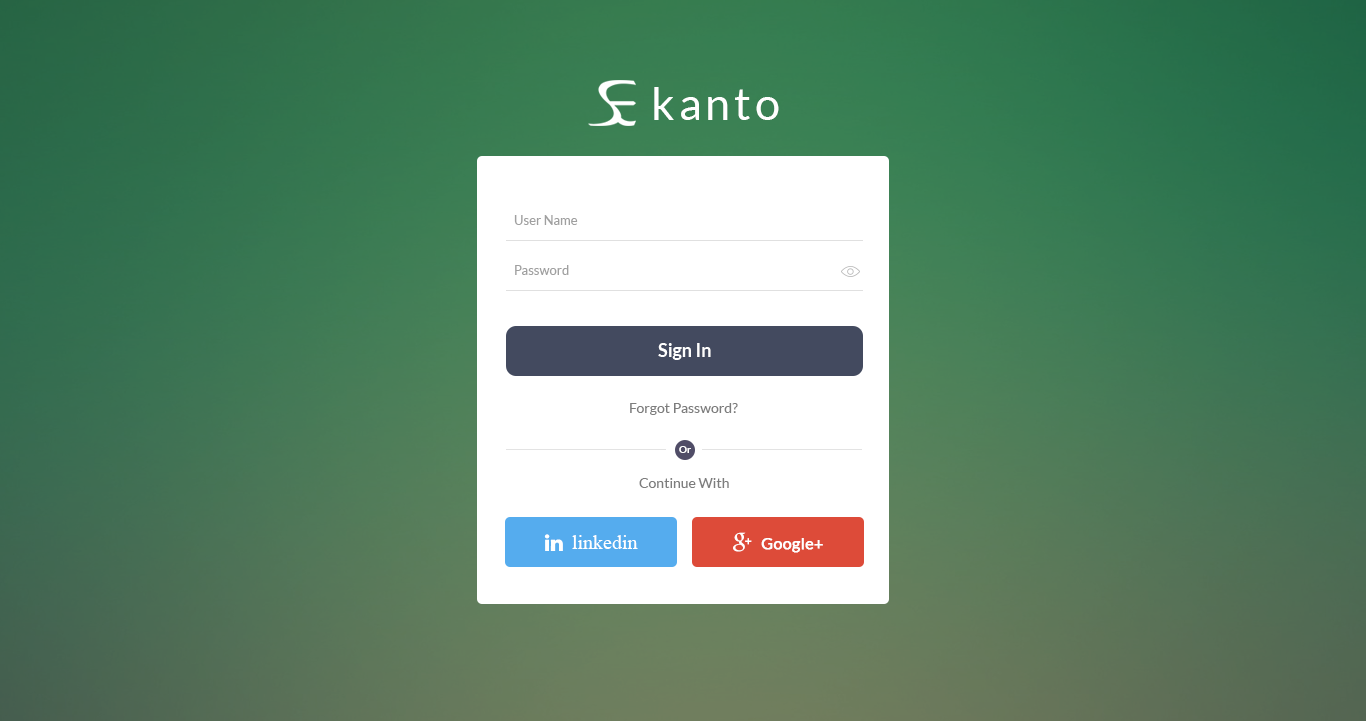
<style>
.page{position:relative;width:1366px;height:721px}
.page>*{position:absolute;margin:0}
.t1{font:44.8px "Lato-Regular";letter-spacing:0.08em;color:#ffffff}
.t2{font:13px "Lato-Regular";color:#a0a0a0}
.t3{font:18px "Lato-Bold";color:#fefefe}
.t4{font:14px "Lato-Regular";color:#7d7d7d}
.t5{font:10px "Lato-Bold";color:#ffffff}
.t6{font:20px "TimesNewRomanPSMT";color:#ffffff}
.t7{font:16px "Lato-Regular";color:#ffffff;font-weight:bold}
</style>
<div class="page">
<p class="t1" style="left:654px;top:87px;width:125px;height:33px">kanto</p>
<p class="t2" style="left:514px;top:215px;width:64px;height:10px">User Name</p>
<p class="t2" style="left:515px;top:265px;width:54px;height:10px">Password</p>
<p class="t3" style="left:658px;top:343px;width:53px;height:17px">Sign In</p>
<p class="t4" style="left:630px;top:403px;width:108px;height:12px">Forgot Password?</p>
<p class="t5" style="left:679px;top:446px;width:12px;height:7px">Or</p>
<p class="t4" style="left:639px;top:478px;width:90px;height:10px">Continue With</p>
<p class="t6" style="left:572px;top:535px;width:66px;height:14px">linkedin</p>
<p class="t7" style="left:761px;top:538px;width:62px;height:15px">Google+</p>
</div>
